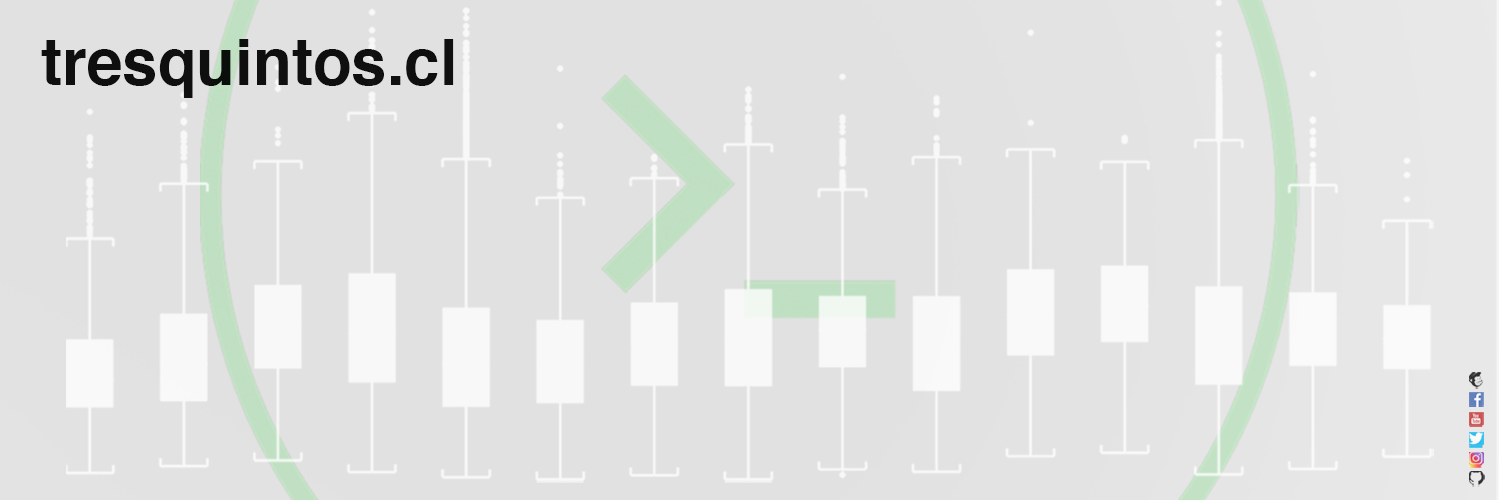
<style>
.page{position:relative;width:1500px;height:500px;background:#e1e1e1}
.page>*{position:absolute;margin:0}
.t1{font:63.5px "Helvetica-Bold";color:#000000}
</style>
<div class="page">
<p class="t1" style="left:41px;top:39px;width:413px;height:59px;opacity:0.97">tresquintos.cl</p>
</div>
